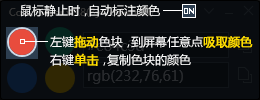
<style>
.page{position:relative;width:260px;height:100px;background:#090c10}
.page>*{position:absolute;margin:0}
.t1{font:12px "MicrosoftYaHei";color:#ffffff}
.t2{font:12px "MicrosoftYaHei";letter-spacing:-0.3em;color:#ffffff}
.t3{font:12px/18px "MicrosoftYaHei";color:#ffffff}
.t4{font:12px/18px "MicrosoftYaHei";color:#ffde00;font-weight:bold}
.t5{font:12px/18px "MicrosoftYaHei";letter-spacing:-0.3em;color:#ffffff}
</style>
<div class="page">
<p class="t1" style="left:21px;top:4px;width:139px;height:13px">鼠标静止时<span class="t2">，</span>自动标注颜色</p>
<p class="t3" style="left:50px;top:35px;width:203px;height:31px">左键<span class="t4">拖动</span>色块<span class="t5">，</span>到屏幕任意点<span class="t4">吸取颜色<br></span>右键<span class="t4">单击</span><span class="t5">，</span>复制色块的颜色</p>
</div>
